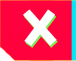
<style>
.page{position:relative;width:76px;height:61px;background:#ff013c}
.page>*{position:absolute;margin:0}
.t1{font:54px "zihunbaibianmoshuti";color:#ffffff;font-style:italic}
</style>
<div class="page">
<p class="t1" style="left:23px;top:9px;width:34px;height:37px">X</p>
<p class="t1" style="left:24px;top:11px;width:34px;height:37px">X</p>
</div>
